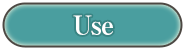
<style>
.page{position:relative;width:185px;height:50px;background:#4a9e9f}
.page>*{position:absolute;margin:0}
.t1{font:26px "RyuminPro-ExBold";letter-spacing:-0.04em;color:#ffffff}
</style>
<div class="page">
<p class="t1" style="left:73px;top:15px;width:40px;height:20px">Use</p>
</div>
